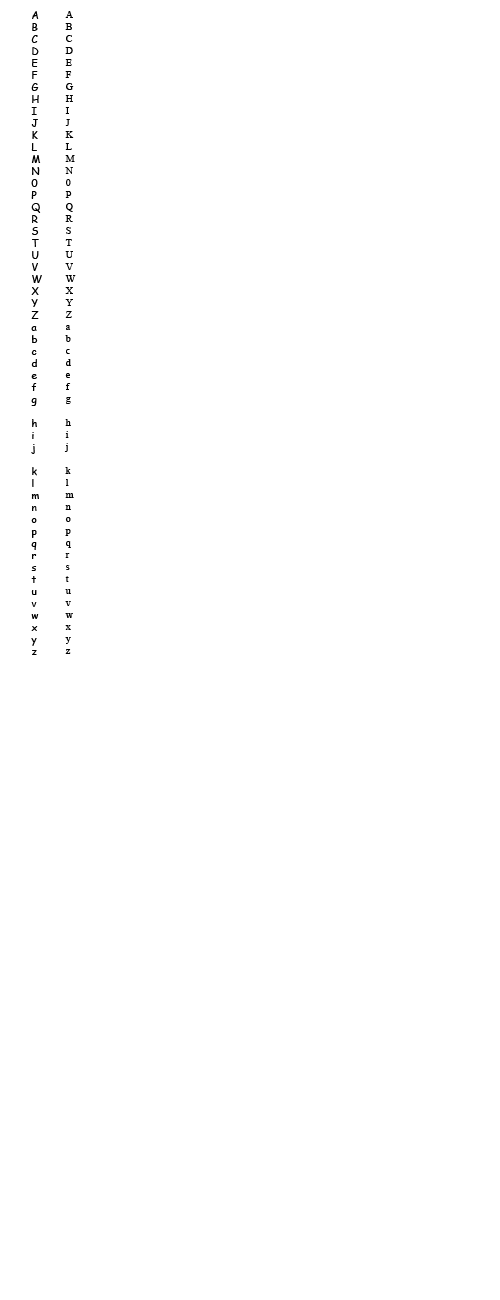
<style>
.page{position:relative;width:500px;height:1300px;background:#ffffff}
.page>*{position:absolute;margin:0}
.t1{font:10px "ComicSansMS";color:#000000}
.t2{font:10px "TimesNewRomanPSMT";color:#000000}
</style>
<div class="page">
<p class="t1" style="left:31px;top:11px;width:11px;height:644px">A<br>B<br>C<br>D<br>E<br>F<br>G<br>H<br>I<br>J<br>K<br>L<br>M<br>N<br>0<br>P<br>Q<br>R<br>S<br>T<br>U<br>V<br>W<br>X<br>Y<br>Z<br>a<br>b<br>c<br>d<br>e<br>f<br>g<br><br>h<br>i<br>j<br><br>k<br>l<br>m<br>n<br>o<br>p<br>q<br>r<br>s<br>t<br>u<br>v<br>w<br>x<br>y<br>z</p>
<p class="t2" style="left:64px;top:11px;width:12px;height:643px">A<br>B<br>C<br>D<br>E<br>F<br>G<br>H<br>I<br>J<br>K<br>L<br>M<br>N<br>0<br>P<br>Q<br>R<br>S<br>T<br>U<br>V<br>W<br>X<br>Y<br>Z<br>a<br>b<br>c<br>d<br>e<br>f<br>g<br><br>h<br>i<br>j<br><br>k<br>l<br>m<br>n<br>o<br>p<br>q<br>r<br>s<br>t<br>u<br>v<br>w<br>x<br>y<br>z</p>
</div>
